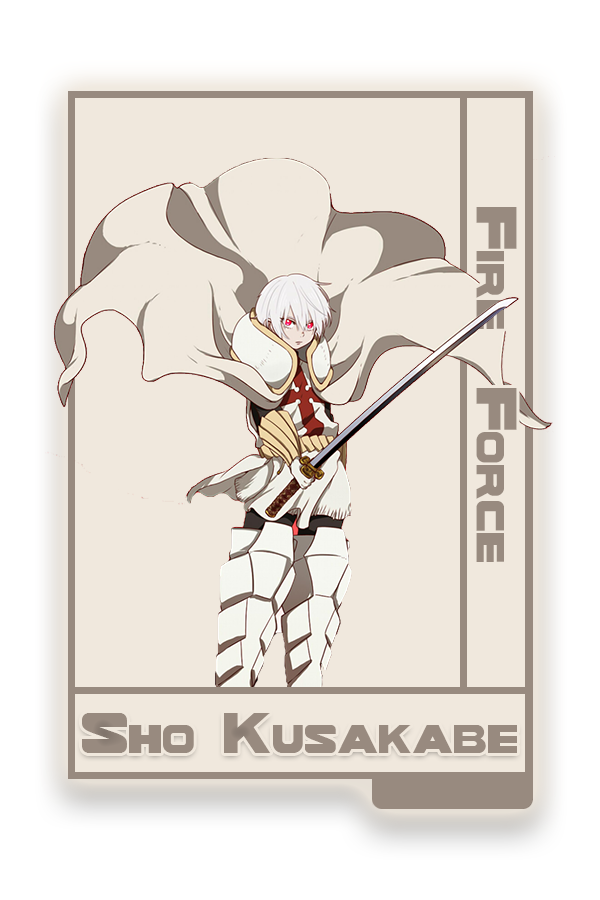
<style>
.page{position:relative;width:600px;height:900px;background:#f0e8dd}
.page>*{position:absolute;margin:0}
.t1{font:45.8px "WildWorldBOLD";color:#988a7f}
</style>
<div class="page">
<p class="t1" style="left:476px;top:207px;width:41px;height:355px;rotate:90deg">Fire  Force</p>
<p class="t1" style="left:82px;top:713px;width:435px;height:40px">Sho Kusakabe</p>
</div>
